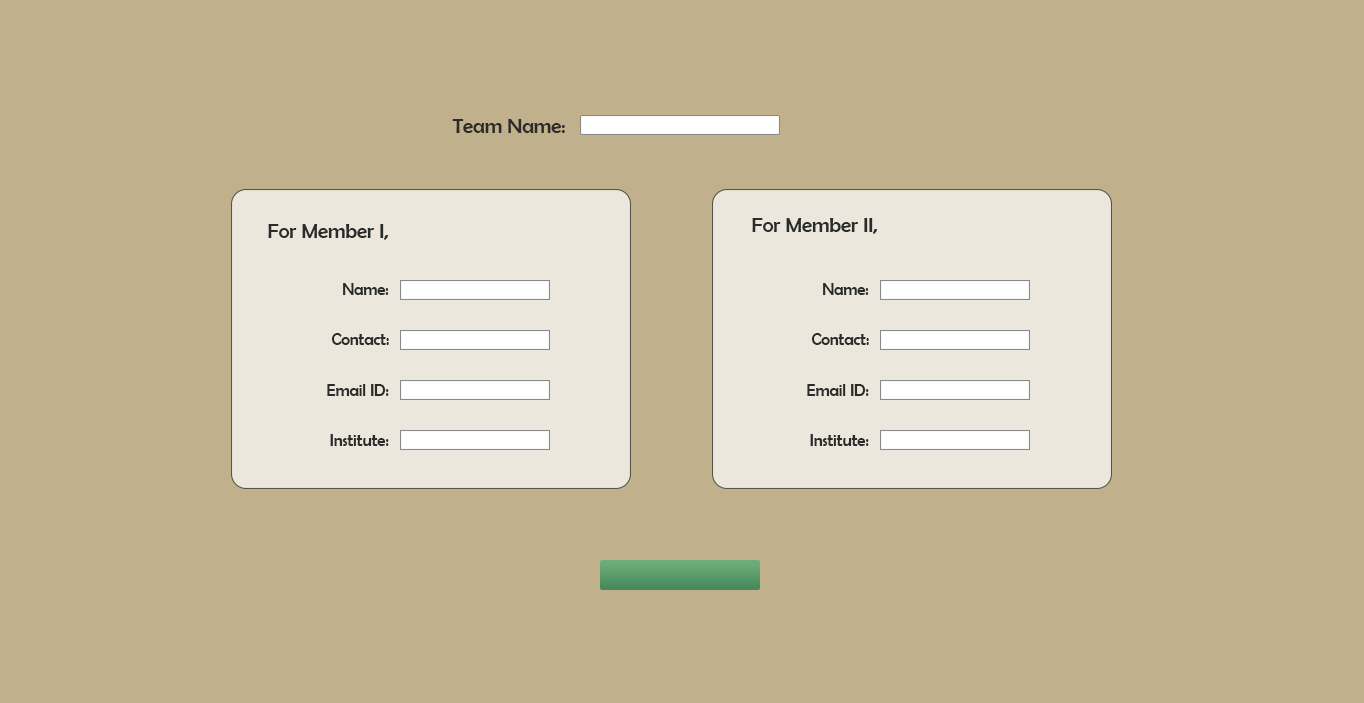
<style>
.page{position:relative;width:1364px;height:703px;background:#c0b08c}
.page>*{position:absolute;margin:0}
.t1{font:20.8px "BerlinSansFB-Reg";color:#292c2a}
.t2{font:16.7px "BerlinSansFB-Reg";color:#292c2a}
</style>
<div class="page">
<p class="t1" style="left:452px;top:119px;width:113px;height:14px">Team Name:</p>
<p class="t1" style="left:752px;top:218px;width:125px;height:16px">For Member II,</p>
<p class="t1" style="left:268px;top:224px;width:120px;height:16px">For Member I,</p>
<p class="t2" style="left:343px;top:283px;width:46px;height:12px">Name:</p>
<p class="t2" style="left:823px;top:283px;width:46px;height:12px">Name:</p>
<p class="t2" style="left:331px;top:333px;width:58px;height:12px">Contact:</p>
<p class="t2" style="left:811px;top:333px;width:58px;height:12px">Contact:</p>
<p class="t2" style="left:327px;top:384px;width:62px;height:12px">Email ID:</p>
<p class="t2" style="left:807px;top:384px;width:62px;height:12px">Email ID:</p>
<p class="t2" style="left:330px;top:434px;width:59px;height:12px">Institute:</p>
<p class="t2" style="left:810px;top:434px;width:59px;height:12px">Institute:</p>
</div>
